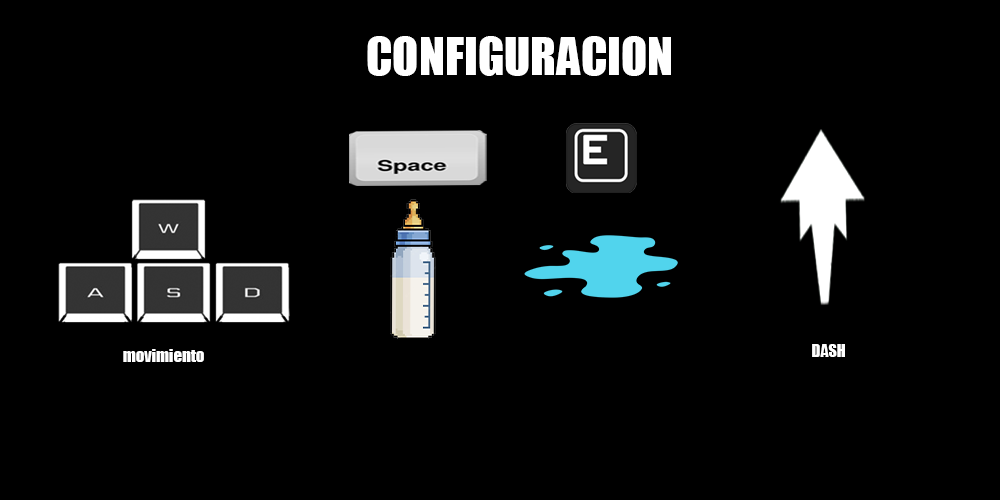
<style>
.page{position:relative;width:1000px;height:500px;background:#000000}
.page>*{position:absolute;margin:0}
.t1{font:48px "Impact";color:#ffffff}
.t2{font:16.7px "Impact";color:#ffffff}
.t3{font:16px "Impact";color:#ffffff}
</style>
<div class="page">
<p class="t1" style="left:367px;top:36px;width:304px;height:40px">CONFIGURACION</p>
<p class="t2" style="left:123px;top:349px;width:81px;height:13px">movimiento</p>
<p class="t3" style="left:812px;top:344px;width:33px;height:13px">DASH</p>
</div>
